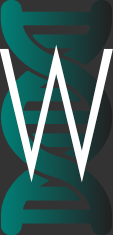
<style>
.page{position:relative;width:113px;height:235px;background:#333333}
.page>*{position:absolute;margin:0}
.t1{font:180px "FuturaBT-Light";color:#ffffff;scale:0.72 1}
</style>
<div class="page">
<p class="t1" style="left:0px;top:44px;width:113px;height:138px">W</p>
</div>
